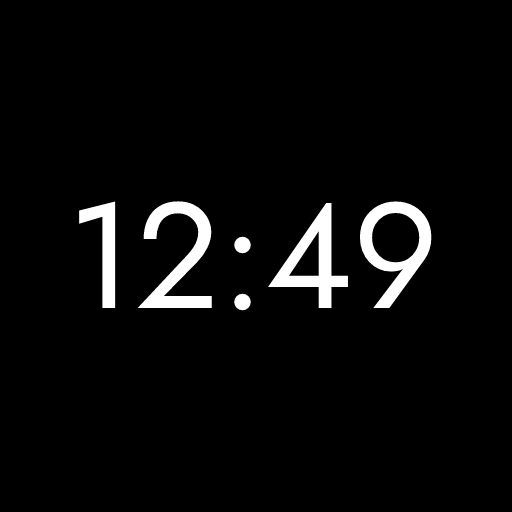
<style>
.page{position:relative;width:512px;height:512px;background:#000000}
.page>*{position:absolute;margin:0}
.t1{font:150px "Jost-Regular";color:#ffffff}
</style>
<div class="page">
<p class="t1" style="left:79px;top:201px;width:353px;height:110px">12:49</p>
</div>
